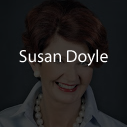
<style>
.page{position:relative;width:127px;height:127px}
.page>*{position:absolute;margin:0}
.t1{font:17.5px "MyriadPro-Regular";color:#ffffff}
</style>
<div class="page">
<p class="t1" style="left:19px;top:49px;width:89px;height:17px">Susan Doyle</p>
</div>
